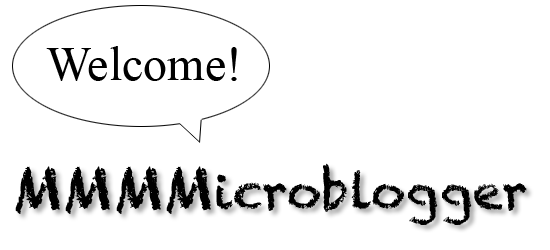
<style>
.page{position:relative;width:550px;height:250px;background:#ffffff}
.page>*{position:absolute;margin:0}
.t1{font:48px "TimesNewRomanPSMT";color:#000000}
.t2{font:48px "Chalkduster";color:#000000}
.t3{font:60px "Chalkduster";color:#000000}
</style>
<div class="page">
<p class="t1" style="left:46px;top:46px;width:191px;height:35px">Welcome!</p>
<p class="t2" style="left:15px;top:163px;width:512px;height:62px"><span class="t3">MMMM</span>icroblogger</p>
</div>
